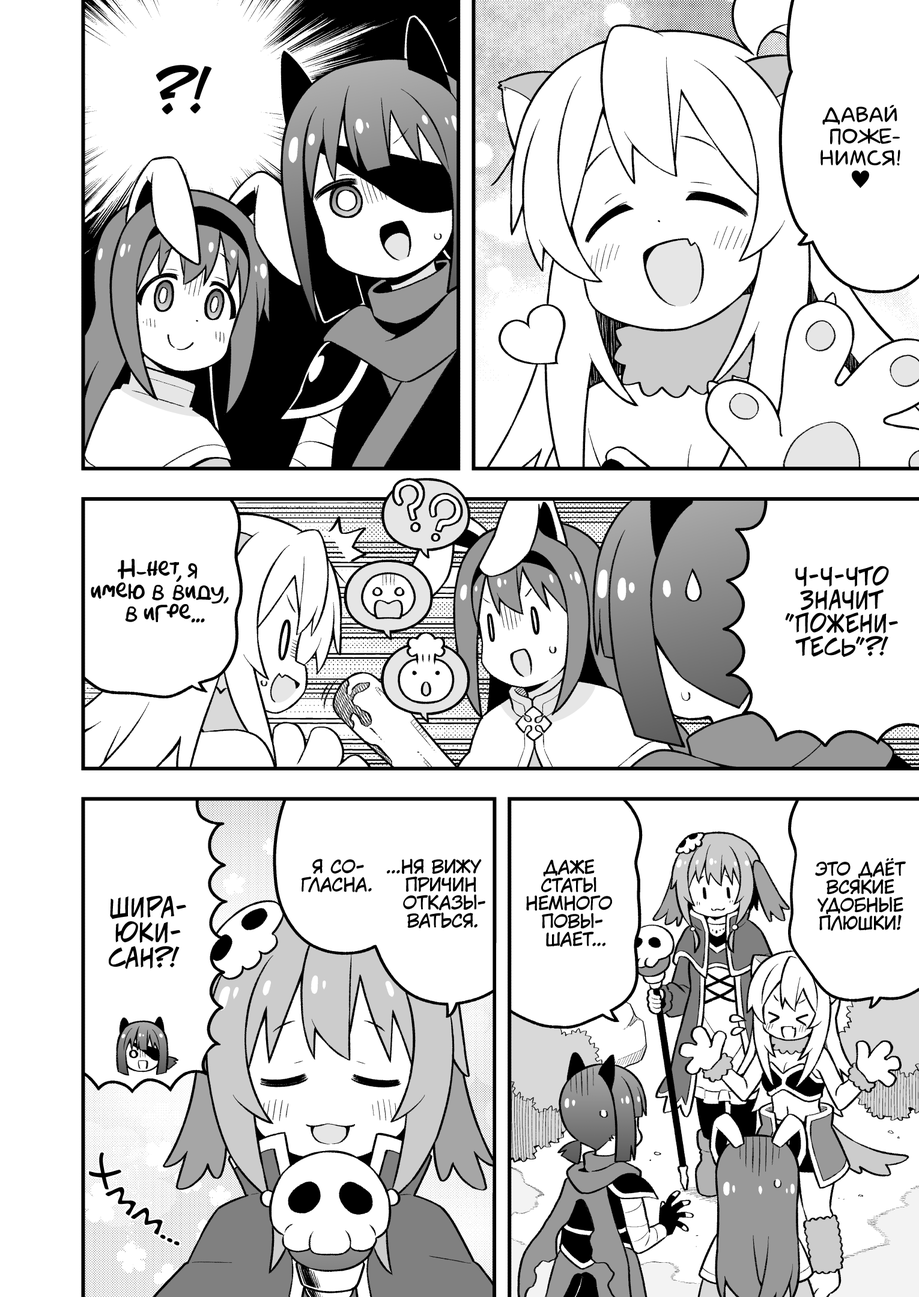
<style>
.page{position:relative;width:919px;height:1297px;background:#ffffff}
.page>*{position:absolute;margin:0}
.t1{font:57.7px "v_CCJeffCampbell";color:#000000;text-transform:uppercase}
.t2{font:21.6px "laCartoonerie";color:#000000;text-transform:uppercase}
.t3{font:21.6px "KozGoPr6N-Regular";color:#000000;text-transform:uppercase}
.t4{font:21.6px "AkbarPlain";color:#000000}
.t5{font:23.4px "v_CCJeffCampbell";color:#000000;text-transform:uppercase}
.t6{font:18px "KuraiVoice2";color:#000000;text-transform:uppercase}
.t7{font:25.2px "v_CCJeffCampbell";color:#000000;text-transform:uppercase}
.t8{font:36px "v_Augie";color:#000000}
</style>
<div class="page">
<p class="t1" style="left:156px;top:65px;width:56px;height:50px">?!</p>
<p class="t2" style="left:821px;top:105px;width:79px;height:83px;text-align:center">Давай<br>поже-<br>нимся!<br><span class="t3">♥</span></p>
<p class="t4" style="left:91px;top:559px;width:138px;height:64px;text-align:center">Н-нет, я<br>имею в виду,<br>в игре...</p>
<p class="t5" style="left:785px;top:566px;width:113px;height:92px;text-align:center">Ч-ч-что<br>значит<br>"пожени-<br>тесь"?!</p>
<p class="t6" style="left:302px;top:859px;width:70px;height:34px;text-align:center">Я со-<br>гласна.</p>
<p class="t6" style="left:387px;top:859px;width:98px;height:70px;text-align:center">...Ня вижу<br>причин<br>отказы-<br>ваться.</p>
<p class="t6" style="left:526px;top:860px;width:86px;height:87px;text-align:center">Даже<br>статы<br>немного<br>повы-<br>шает...</p>
<p class="t6" style="left:815px;top:858px;width:91px;height:73px;text-align:center">Это даёт<br>всякие<br>удобные<br>плюшки!</p>
<p class="t7" style="left:109px;top:896px;width:77px;height:74px;text-align:center">Шира-<br>юки-<br>сан?!</p>
<p class="t8" style="left:89px;top:1153px;width:91px;height:93px;rotate:40deg">Хмм...</p>
</div>
